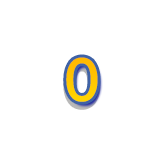
<style>
.page{position:relative;width:164px;height:164px;background:#ffffff}
.page>*{position:absolute;margin:0}
.t1{font:59.8px "PingFangHK-Semibold";color:#ffc500;text-transform:uppercase}
</style>
<div class="page">
<p class="t1" style="left:66px;top:57px;width:32px;height:45px">0</p>
</div>
